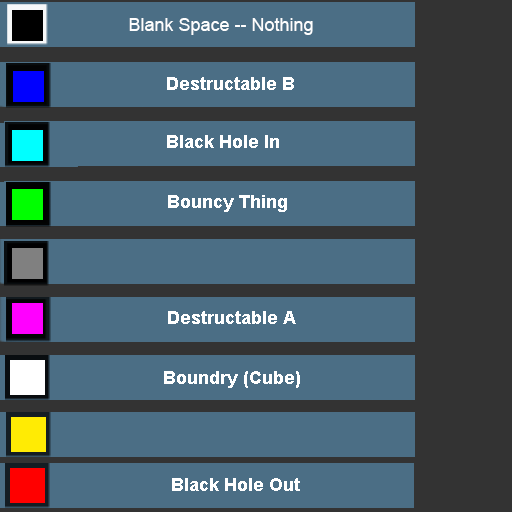
<style>
.page{position:relative;width:512px;height:512px;background:#4b6e85}
.page>*{position:absolute;margin:0}
.t1{font:18px "ArialMT";color:#fefefe}
.t2{font:18px "Arial-BoldMT";color:#ffffff}
</style>
<div class="page">
<p class="t1" style="left:129px;top:18px;width:184px;height:17px">Blank Space -- Nothing</p>
<p class="t2" style="left:167px;top:77px;width:127px;height:13px">Destructable B</p>
<p class="t2" style="left:167px;top:135px;width:112px;height:13px">Black Hole In</p>
<p class="t2" style="left:168px;top:195px;width:119px;height:17px">Bouncy Thing</p>
<p class="t2" style="left:168px;top:311px;width:128px;height:13px">Destructable A</p>
<p class="t2" style="left:164px;top:371px;width:136px;height:17px">Boundry (Cube)</p>
<p class="t2" style="left:172px;top:478px;width:128px;height:13px">Black Hole Out</p>
</div>
